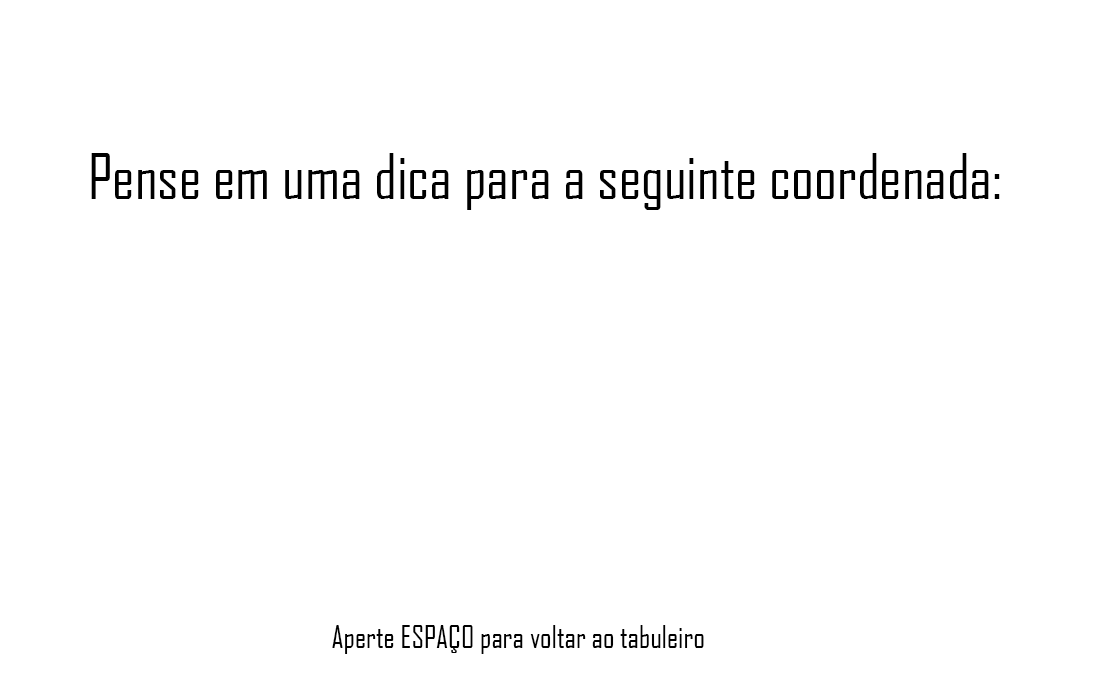
<style>
.page{position:relative;width:1100px;height:700px;background:#ffffff}
.page>*{position:absolute;margin:0}
.t1{font:60px "AgencyFB-Reg";color:#000000}
.t2{font:30px "AgencyFB-Reg";color:#000000}
</style>
<div class="page">
<p class="t1" style="left:91px;top:153px;width:909px;height:57px">Pense em uma dica para a seguinte coordenada:</p>
<p class="t2" style="left:332px;top:625px;width:372px;height:29px">Aperte ESPAÇO para voltar ao tabuleiro</p>
</div>
